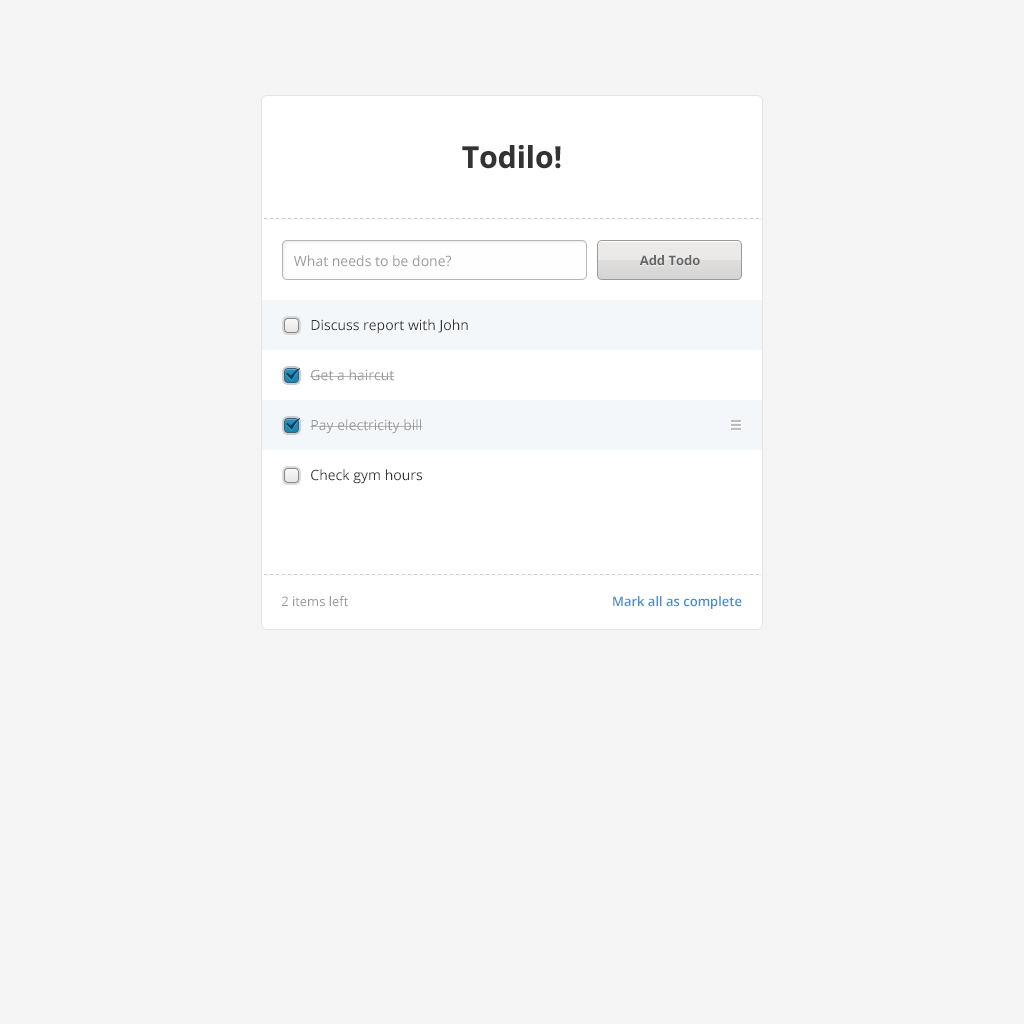
<style>
.page{position:relative;width:1024px;height:1024px;background:#f6f5f5}
.page>*{position:absolute;margin:0}
.t1{font:30px "OpenSans-Bold";color:#333333}
.t2{font:14px "OpenSans";color:#999999}
.t3{font:13px "OpenSans-Bold";color:#646463}
.t4{font:14px "OpenSans";color:#333333}
.t5{font:13px "OpenSans";color:#999999}
.t6{font:13px "OpenSans-Semibold";color:#448ccb}
</style>
<div class="page">
<p class="t1" style="left:462px;top:145px;width:99px;height:24px">Todilo!</p>
<p class="t2" style="left:294px;top:255px;width:158px;height:12px">What needs to be done?</p>
<p class="t3" style="left:639px;top:255px;width:61px;height:11px">Add Todo</p>
<p class="t4" style="left:311px;top:319px;width:157px;height:15px">Discuss report with John</p>
<p class="t2" style="left:310px;top:369px;width:85px;height:12px">Get a haircut</p>
<p class="t2" style="left:310px;top:419px;width:113px;height:15px">Pay electricity bill</p>
<p class="t4" style="left:311px;top:469px;width:111px;height:15px">Check gym hours</p>
<p class="t5" style="left:282px;top:596px;width:66px;height:11px">2 items left</p>
<p class="t6" style="left:613px;top:596px;width:129px;height:13px">Mark all as complete</p>
</div>
